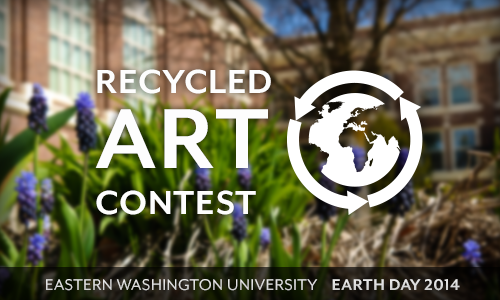
<style>
.page{position:relative;width:500px;height:300px}
.page>*{position:absolute;margin:0}
.t1{font:38.3px/46.3px "MrEavesModOT-Bold";letter-spacing:0.02em;color:#fdfdfd;text-transform:uppercase}
.t2{font:97.9px/75.5px "MrEavesModOT-Bold";letter-spacing:0.02em;color:#fdfdfd;text-transform:uppercase}
.t3{font:18px "MrEavesModOT-Reg";letter-spacing:0.02em;color:#dbdbdb;text-transform:uppercase}
.t4{font:18px "MrEavesModOT-Bold";letter-spacing:0.02em;color:#dbdbdb;text-transform:uppercase}
</style>
<div class="page">
<p class="t1" style="left:95px;top:69px;width:176px;height:146px">Recycled <br><span class="t2">art <br></span>contest</p>
<p class="t3" style="left:46px;top:279px;width:414px;height:12px">Eastern Washington university    <span class="t4">Earth day 2014</span></p>
</div>
